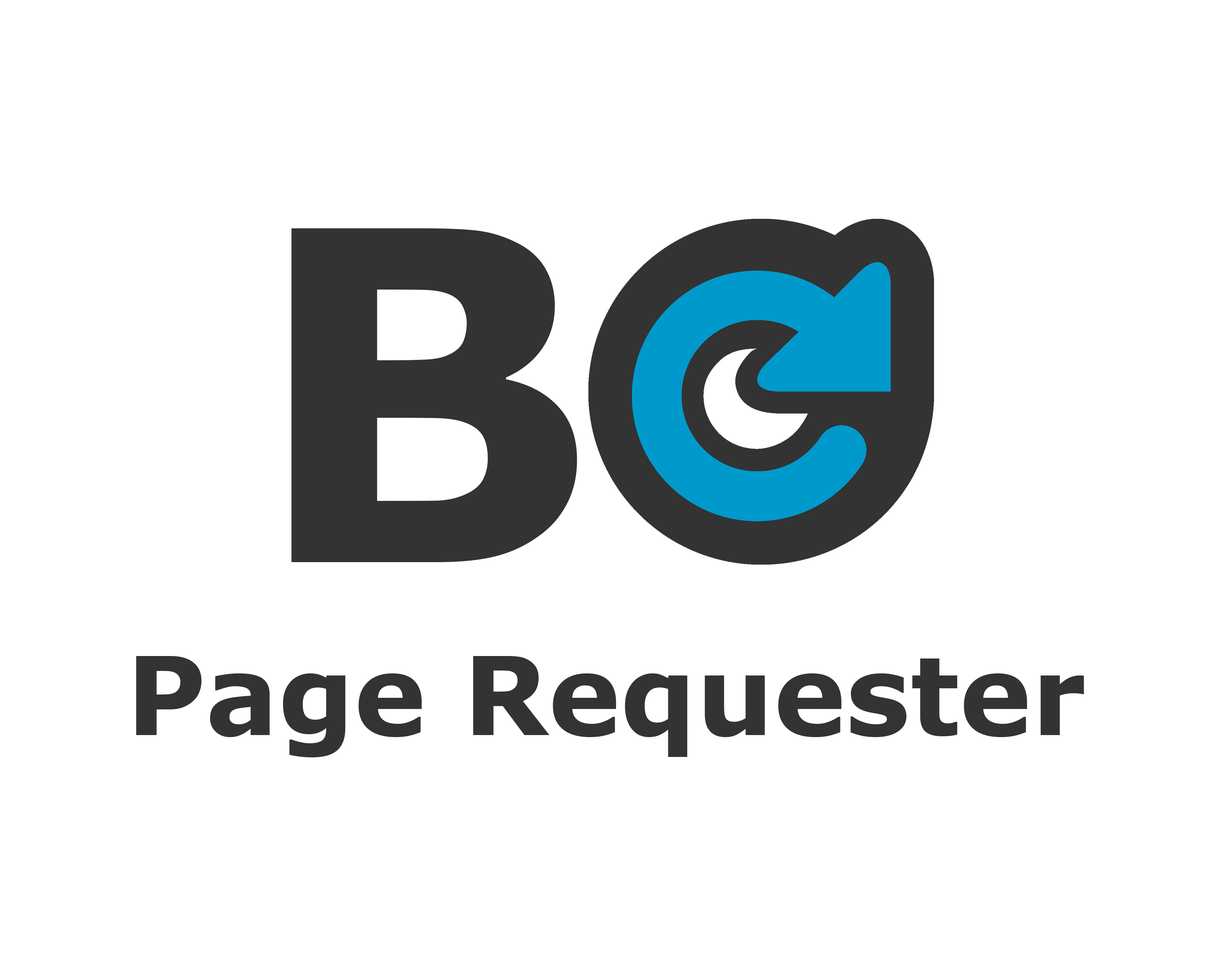
<style>
.page{position:relative;width:1221px;height:977px;background:#ffffff}
.page>*{position:absolute;margin:0}
.t1{font:459px "Verdana-Bold";color:#333333}
.t2{font:108.5px "Verdana-Bold";color:#333333}
</style>
<div class="page">
<p class="t1" style="left:291px;top:228px;width:286px;height:334px">B</p>
<p class="t2" style="left:136px;top:656px;width:948px;height:101px">Page Requester</p>
</div>
